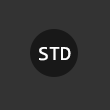
<style>
.page{position:relative;width:110px;height:110px;background:#333333}
.page>*{position:absolute;margin:0}
.t1{font:20px "Consolas";color:#ffffff}
</style>
<div class="page">
<p class="t1" style="left:39px;top:47px;width:32px;height:14px">STD</p>
</div>
